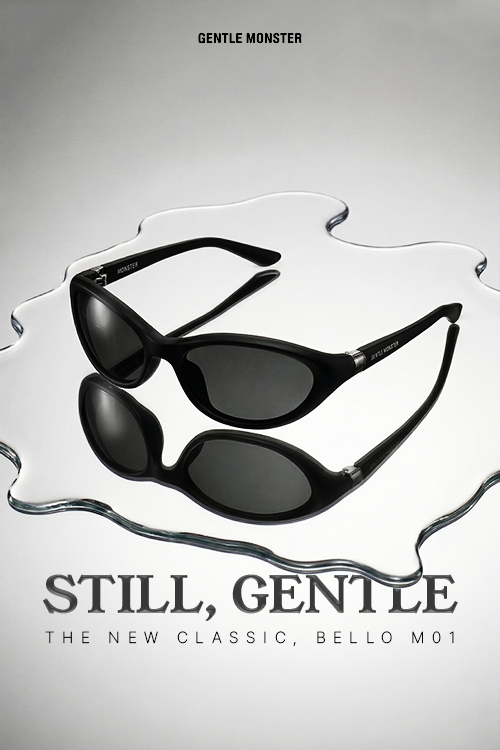
<style>
.page{position:relative;width:500px;height:750px}
.page>*{position:absolute;margin:0}
.t1{font:50px "YoungSerif-Regular"}
.t2{font:16px "Pretendard-ExtraLight";letter-spacing:0.46em;color:#000000;text-transform:uppercase}
</style>
<div class="page">
<p class="t1" style="left:43px;top:574px;width:415px;height:47px">STILL, GENTLE</p>
<p class="t2" style="left:45px;top:631px;width:409px;height:16px">The new classic, BELLO M01</p>
</div>
